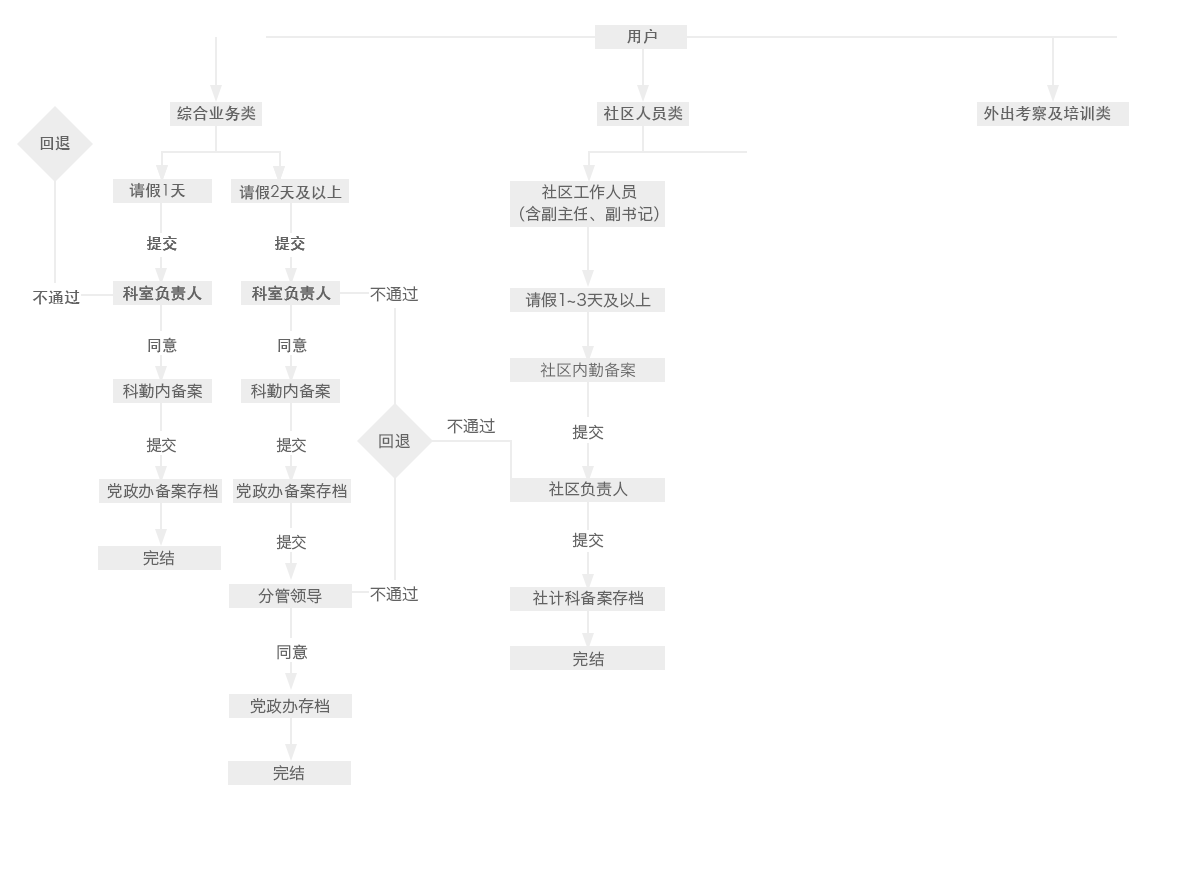
<style>
.page{position:relative;width:1200px;height:880px;background:#ffffff}
.page>*{position:absolute;margin:0}
.t1{font:16px "STHeiti";color:#636363}
.t2{font:12px "STHeiti";color:#636363}
.t3{font:16px/26.7px "HiraginoSansGB-W3";color:#636363}
.t4{font:12px "HiraginoSansGB-W3";color:#636363}
.t5{font:16px "HiraginoSansGB-W3";color:#636363}
</style>
<div class="page">
<p class="t1" style="left:627px;top:29px;width:30px;height:15px">用户</p>
<p class="t1" style="left:177px;top:105px;width:79px;height:16px">综合业务类</p>
<p class="t1" style="left:604px;top:105px;width:79px;height:16px">社区人员类</p>
<p class="t1" style="left:984px;top:105px;width:127px;height:16px">外出考察及培训类</p>
<p class="t2" style="left:40px;top:136px;width:30px;height:15px">回退</p>
<p class="t1" style="left:129px;top:182px;width:57px;height:16px">请假1天</p>
<p class="t1" style="left:239px;top:184px;width:103px;height:16px">请假2天及以上</p>
<p class="t3" style="left:520px;top:184px;width:139px;height:38px;text-align:center">社区工作人员<br>（含副主任、副书记）</p>
<p class="t1" style="left:147px;top:236px;width:30px;height:15px">提交</p>
<p class="t1" style="left:147px;top:236px;width:30px;height:15px">提交</p>
<p class="t1" style="left:275px;top:236px;width:30px;height:15px">提交</p>
<p class="t1" style="left:275px;top:236px;width:30px;height:15px">提交</p>
<p class="t2" style="left:32px;top:290px;width:48px;height:15px">不通过</p>
<p class="t2" style="left:123px;top:285px;width:79px;height:16px">科室负责人</p>
<p class="t2" style="left:123px;top:285px;width:79px;height:16px">科室负责人</p>
<p class="t2" style="left:252px;top:285px;width:79px;height:16px">科室负责人</p>
<p class="t2" style="left:252px;top:285px;width:79px;height:16px">科室负责人</p>
<p class="t4" style="left:370px;top:286px;width:49px;height:16px">不通过</p>
<p class="t5" style="left:525px;top:292px;width:126px;height:16px">请假1~3天及以上</p>
<p class="t1" style="left:148px;top:337px;width:29px;height:16px">同意</p>
<p class="t1" style="left:278px;top:337px;width:29px;height:16px">同意</p>
<p class="t5" style="left:540px;top:362px;width:96px;height:16px">社区内勤备案</p>
<p class="t4" style="left:123px;top:383px;width:79px;height:16px">科勤内备案</p>
<p class="t4" style="left:251px;top:383px;width:79px;height:16px">科勤内备案</p>
<p class="t4" style="left:447px;top:418px;width:49px;height:16px">不通过</p>
<p class="t4" style="left:572px;top:424px;width:32px;height:16px">提交</p>
<p class="t5" style="left:146px;top:437px;width:30px;height:16px">提交</p>
<p class="t5" style="left:276px;top:437px;width:30px;height:16px">提交</p>
<p class="t4" style="left:379px;top:433px;width:31px;height:16px">回退</p>
<p class="t4" style="left:107px;top:483px;width:111px;height:16px">党政办备案存档</p>
<p class="t4" style="left:236px;top:483px;width:111px;height:16px">党政办备案存档</p>
<p class="t5" style="left:549px;top:481px;width:79px;height:16px">社区负责人</p>
<p class="t5" style="left:276px;top:534px;width:30px;height:16px">提交</p>
<p class="t4" style="left:572px;top:532px;width:32px;height:16px">提交</p>
<p class="t4" style="left:143px;top:550px;width:31px;height:16px">完结</p>
<p class="t4" style="left:258px;top:588px;width:64px;height:16px">分管领导</p>
<p class="t4" style="left:370px;top:586px;width:49px;height:16px">不通过</p>
<p class="t5" style="left:533px;top:590px;width:111px;height:16px">社计科备案存档</p>
<p class="t5" style="left:277px;top:644px;width:31px;height:16px">同意</p>
<p class="t5" style="left:573px;top:651px;width:31px;height:16px">完结</p>
<p class="t4" style="left:250px;top:698px;width:80px;height:16px">党政办存档</p>
<p class="t4" style="left:273px;top:765px;width:31px;height:16px">完结</p>
</div>
